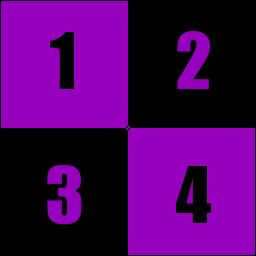
<style>
.page{position:relative;width:256px;height:256px;background:#000000}
.page>*{position:absolute;margin:0}
.t1{font:72px "Impact";color:#000000}
.t2{font:72px "Impact";color:#9600bc}
</style>
<div class="page">
<p class="t1" style="left:50px;top:32px;width:24px;height:57px">1</p>
<p class="t2" style="left:177px;top:31px;width:33px;height:58px">2</p>
<p class="t2" style="left:47px;top:165px;width:35px;height:60px">3</p>
<p class="t1" style="left:176px;top:166px;width:35px;height:57px">4</p>
</div>
